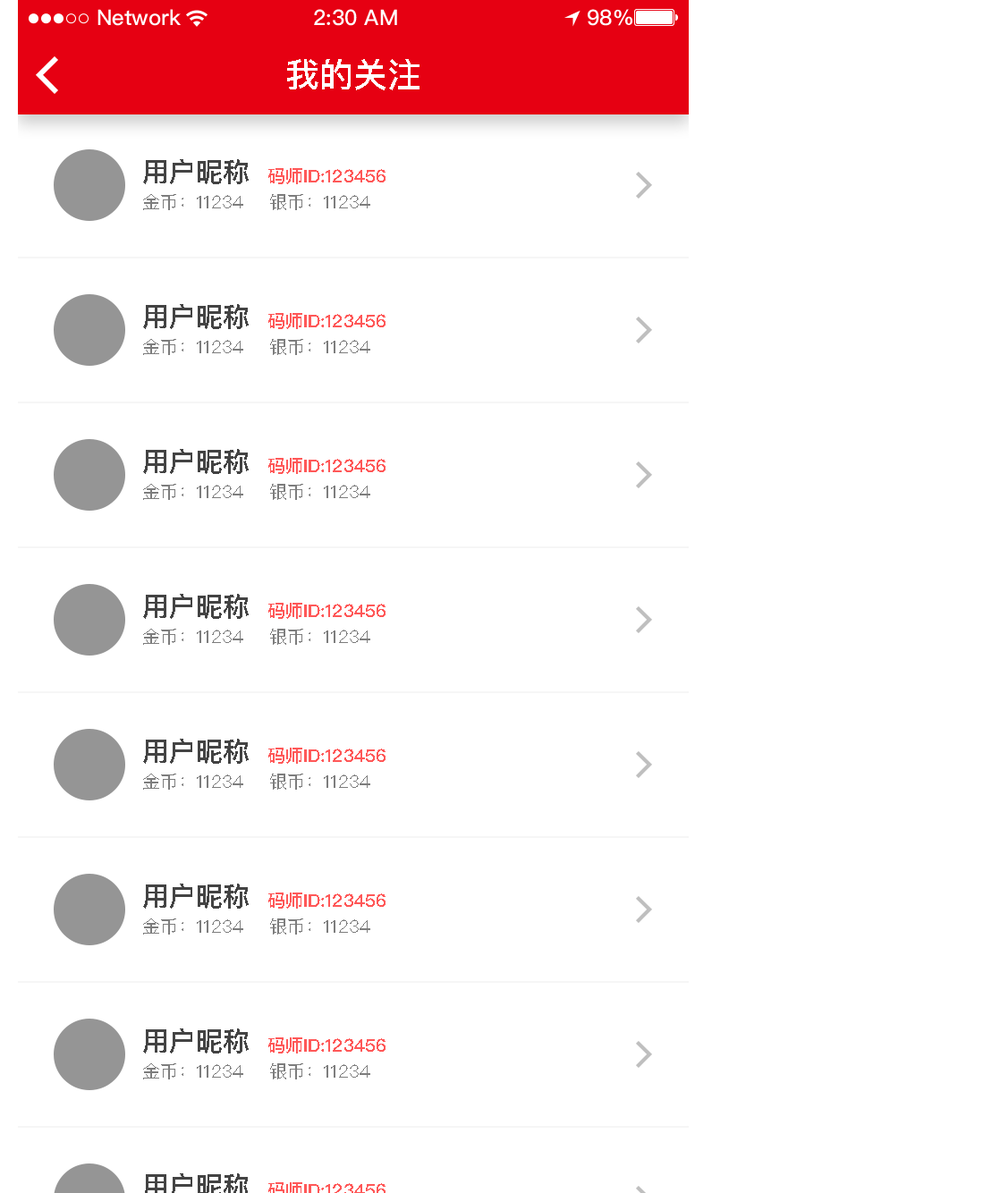
<style>
.page{position:relative;width:1000px;height:1193px;background:#ffffff}
.page>*{position:absolute;margin:0}
.t1{font:34px "PingFangSC-Medium";color:#ffffff;text-transform:uppercase}
.t2{font:26.8px "PingFangSC-Medium";color:#434343;text-transform:uppercase}
.t3{font:17.9px "PingFangSC-Medium";color:#ff5858;text-transform:uppercase}
.t4{font:17.9px "PingFangSC-Regular";color:#7d7d7d;text-transform:uppercase}
</style>
<div class="page">
<p class="t1" style="left:287px;top:59px;width:132px;height:31px">我的关注</p>
<p class="t2" style="left:143px;top:159px;width:106px;height:25px">用户昵称</p>
<p class="t3" style="left:268px;top:168px;width:117px;height:16px">码师ID:123456</p>
<p class="t4" style="left:143px;top:194px;width:100px;height:16px">金币：11234</p>
<p class="t4" style="left:270px;top:194px;width:100px;height:16px">银币：11234</p>
<p class="t2" style="left:143px;top:304px;width:106px;height:25px">用户昵称</p>
<p class="t3" style="left:268px;top:313px;width:117px;height:16px">码师ID:123456</p>
<p class="t4" style="left:143px;top:339px;width:100px;height:16px">金币：11234</p>
<p class="t4" style="left:270px;top:339px;width:100px;height:16px">银币：11234</p>
<p class="t2" style="left:143px;top:449px;width:106px;height:25px">用户昵称</p>
<p class="t3" style="left:268px;top:458px;width:117px;height:16px">码师ID:123456</p>
<p class="t4" style="left:143px;top:484px;width:100px;height:16px">金币：11234</p>
<p class="t4" style="left:270px;top:484px;width:100px;height:16px">银币：11234</p>
<p class="t2" style="left:143px;top:594px;width:106px;height:25px">用户昵称</p>
<p class="t3" style="left:268px;top:603px;width:117px;height:16px">码师ID:123456</p>
<p class="t4" style="left:143px;top:629px;width:100px;height:16px">金币：11234</p>
<p class="t4" style="left:270px;top:629px;width:100px;height:16px">银币：11234</p>
<p class="t2" style="left:143px;top:739px;width:106px;height:25px">用户昵称</p>
<p class="t3" style="left:268px;top:748px;width:117px;height:16px">码师ID:123456</p>
<p class="t4" style="left:143px;top:773px;width:100px;height:17px">金币：11234</p>
<p class="t4" style="left:270px;top:773px;width:100px;height:17px">银币：11234</p>
<p class="t2" style="left:143px;top:883px;width:106px;height:25px">用户昵称</p>
<p class="t3" style="left:268px;top:892px;width:117px;height:16px">码师ID:123456</p>
<p class="t4" style="left:143px;top:918px;width:100px;height:16px">金币：11234</p>
<p class="t4" style="left:270px;top:918px;width:100px;height:16px">银币：11234</p>
<p class="t2" style="left:143px;top:1028px;width:106px;height:25px">用户昵称</p>
<p class="t3" style="left:268px;top:1037px;width:117px;height:16px">码师ID:123456</p>
<p class="t4" style="left:143px;top:1063px;width:100px;height:16px">金币：11234</p>
<p class="t4" style="left:270px;top:1063px;width:100px;height:16px">银币：11234</p>
</div>
